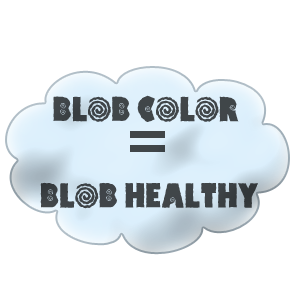
<style>
.page{position:relative;width:300px;height:300px;background:#ffffff}
.page>*{position:absolute;margin:0}
.t1{font:36px "HippoCritic";color:#404549}
</style>
<div class="page">
<p class="t1" style="left:40px;top:95px;width:218px;height:114px;text-align:center">BLOB COLOR <br><br>BLOB HEALTHY</p>
</div>
